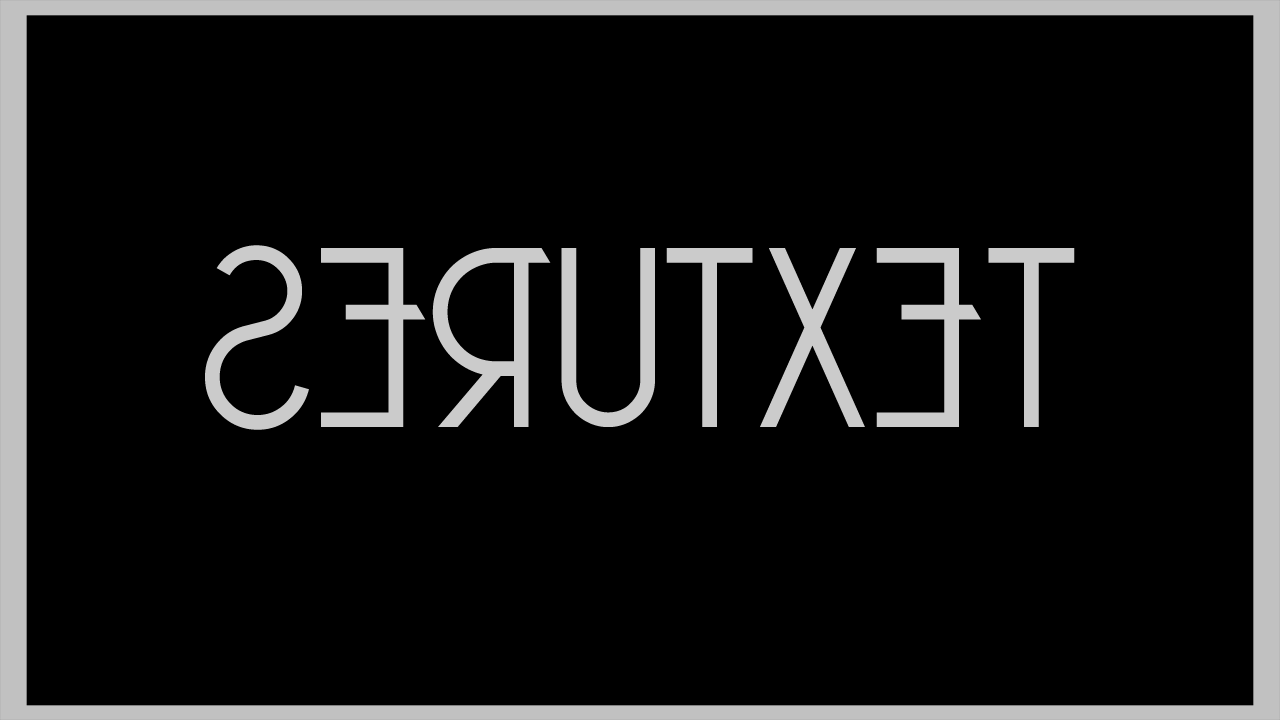
<style>
.page{position:relative;width:1280px;height:720px;background:#000000}
.page>*{position:absolute;margin:0}
.t1{font:250px "BelleroseLight";color:#cbcbcb}
</style>
<div class="page">
<p class="t1" style="left:205px;top:245px;width:870px;height:185px;rotate:180deg">TEXTURES</p>
</div>
